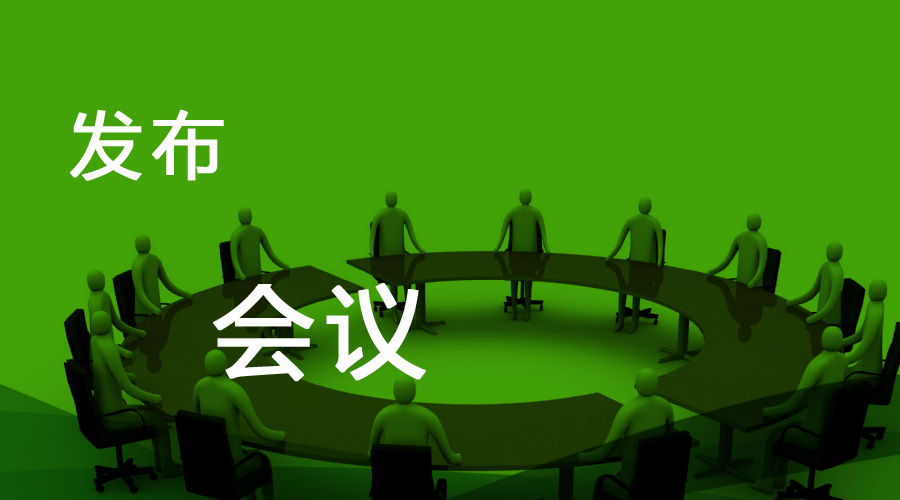
<style>
.page{position:relative;width:900px;height:500px;background:#42a207}
.page>*{position:absolute;margin:0}
.t1{font:72px "MicrosoftYaHei";letter-spacing:0.1em;color:#ffffff;font-weight:bold}
.t2{font:100px "MicrosoftYaHei";letter-spacing:0.1em;color:#ffffff;font-weight:bold}
</style>
<div class="page">
<p class="t1" style="left:70px;top:109px;width:154px;height:72px">发布</p>
<p class="t2" style="left:213px;top:283px;width:213px;height:99px">会议</p>
</div>
